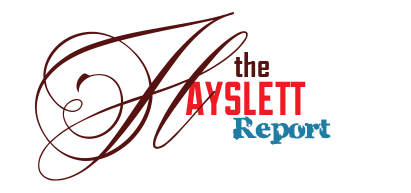
<style>
.page{position:relative;width:411px;height:193px;background:#ffffff}
.page>*{position:absolute;margin:0}
.t1{font:166.7px "BeakedTyrantPersonalUse";color:#561210}
.t2{font:33.3px "AgencyFB-Bold";color:#561210}
.t3{font:58.3px "Duke-Fill";color:#ed1c24}
.t4{font:50px "CharlesS.";color:#217ca3}
</style>
<div class="page">
<p class="t1" style="left:34px;top:12px;width:214px;height:169px">H</p>
<p class="t2" style="left:234px;top:52px;width:35px;height:25px">the</p>
<p class="t3" style="left:186px;top:81px;width:120px;height:34px">ayslett</p>
<p class="t4" style="left:232px;top:116px;width:99px;height:29px">Report</p>
</div>
